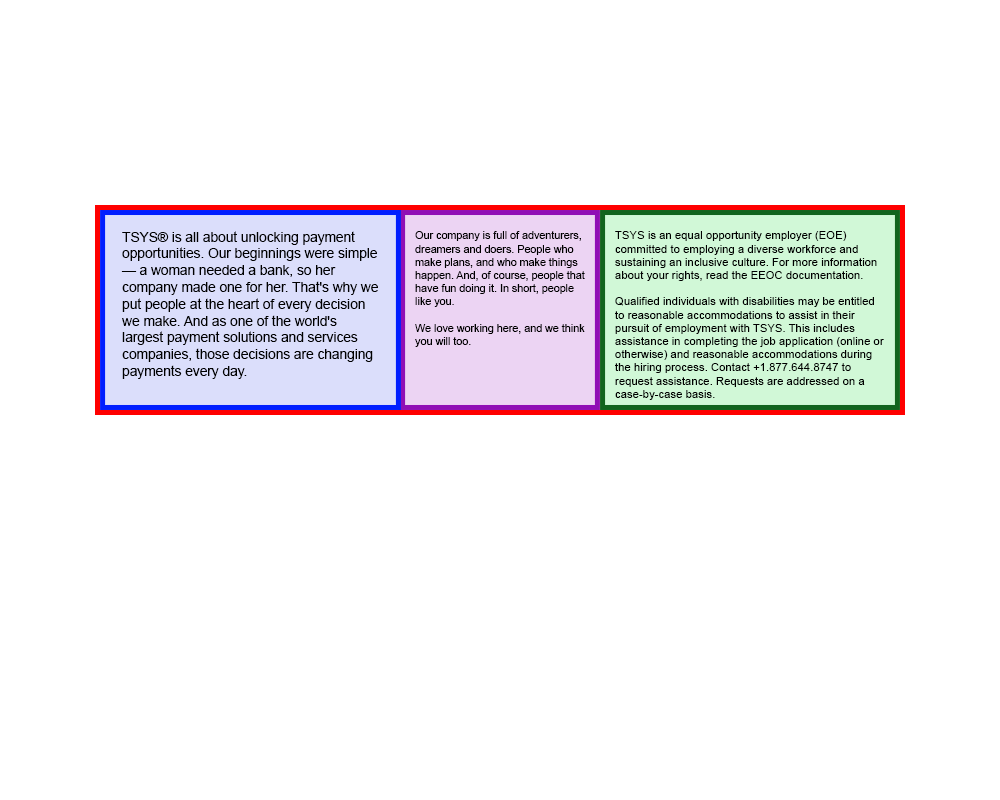
<style>
.page{position:relative;width:1000px;height:800px;background:#ffffff}
.page>*{position:absolute;margin:0}
.t1{font:14px "ArialMT";color:#000000}
.t2{font:11px "ArialMT";color:#000000}
.t3{font:11px "ArialMT";color:#000000;scale:1.03 1}
</style>
<div class="page">
<p class="t1" style="left:121px;top:231px;width:257px;height:148px">TSYS® is all about unlocking payment opportunities. Our beginnings were simple — a woman needed a bank, so her company made one for her. That's why we put people at the heart of every decision we make. And as one of the world's largest payment solutions and services companies, those decisions are changing payments every day.</p>
<p class="t2" style="left:415px;top:231px;width:170px;height:116px">Our company is full of adventurers, dreamers and doers. People who make plans, and who make things happen. And, of course, people that have fun doing it. In short, people like you.<br><br>We love working here, and we think you will too.</p>
<p class="t3" style="left:615px;top:231px;width:269px;height:169px">TSYS is an equal opportunity employer (EOE) committed to employing a diverse workforce and sustaining an inclusive culture. For more information about your rights, read the EEOC documentation.<br><br>Qualified individuals with disabilities may be entitled to reasonable accommodations to assist in their pursuit of employment with TSYS. This includes assistance in completing the job application (online or otherwise) and reasonable accommodations during the hiring process. Contact +1.877.644.8747 to request assistance. Requests are addressed on a case-by-case basis.</p>
</div>
